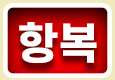
<style>
.page{position:relative;width:115px;height:80px;background:#ffffff}
.page>*{position:absolute;margin:0}
.t1{font:42.1px "S-CoreDream-6Bold";color:#ffffff;font-weight:bold}
</style>
<div class="page">
<p class="t1" style="left:19px;top:22px;width:78px;height:41px">항복</p>
</div>
